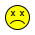
<style>
.page{position:relative;width:35px;height:35px;background:#ffffff}
.page>*{position:absolute;margin:0}
.t1{font:9px "Helvetica-Bold"}
</style>
<div class="page">
<p class="t1" style="left:10px;top:11px;width:6px;height:5px">x</p>
<p class="t1" style="left:19px;top:11px;width:6px;height:5px">x</p>
</div>
